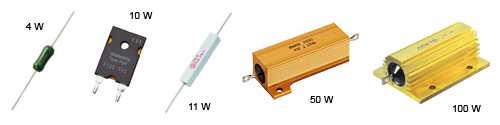
<style>
.page{position:relative;width:500px;height:125px;background:#ffffff}
.page>*{position:absolute;margin:0}
.t1{font:10px "ArialMT";color:#000000}
</style>
<div class="page">
<p class="t1" style="left:130px;top:12px;width:23px;height:7px">10 W</p>
<p class="t1" style="left:25px;top:23px;width:19px;height:7px">4 W</p>
<p class="t1" style="left:310px;top:96px;width:24px;height:7px">50 W</p>
<p class="t1" style="left:189px;top:103px;width:22px;height:7px">11 W</p>
<p class="t1" style="left:453px;top:105px;width:28px;height:7px">100 W</p>
</div>
